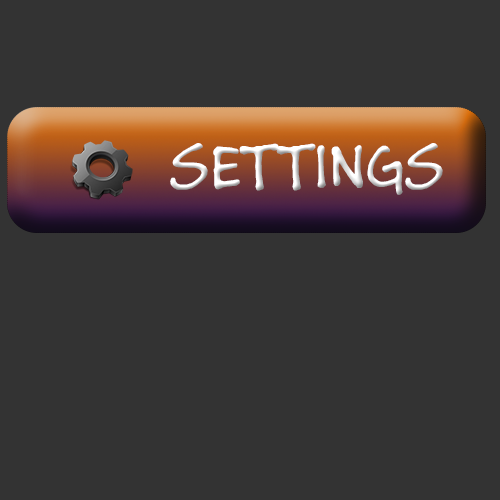
<style>
.page{position:relative;width:500px;height:500px;background:#333333}
.page>*{position:absolute;margin:0}
.t1{font:70.6px "BuxtonSketch"}
.t2{font:52.9px "CopperplateGothic-Light"}
</style>
<div class="page">
<p class="t1" style="left:170px;top:143px;width:273px;height:52px"><span class="t2">          </span>SETTINGS</p>
</div>
